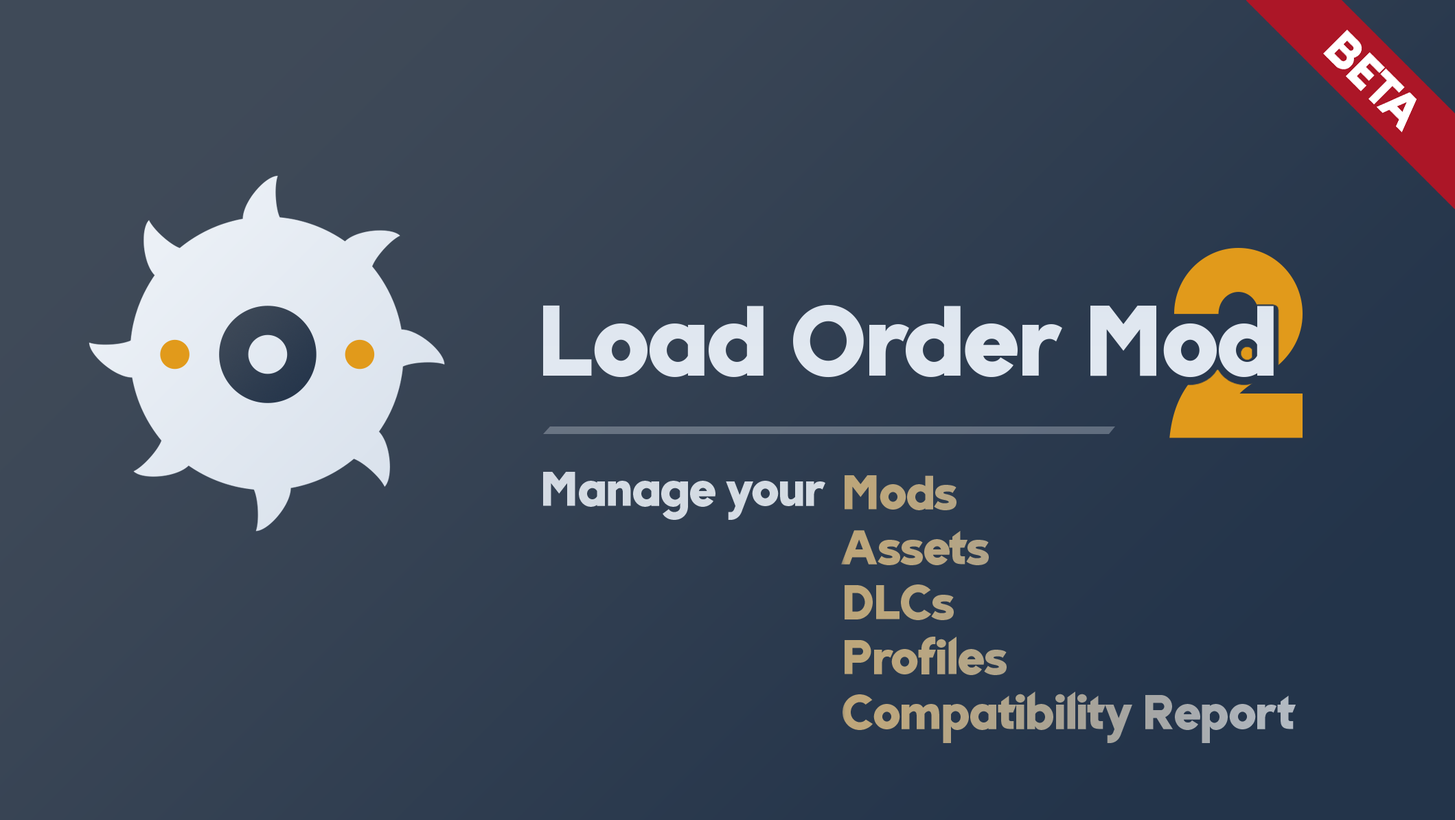
<style>
.page{position:relative;width:1455px;height:820px}
.page>*{position:absolute;margin:0}
.t1{font:307.3px "Slenco-Black";letter-spacing:-0.02em;color:#e19a1b}
.t2{font:113.5px "Slenco-Black";letter-spacing:-0.02em;color:#e0e7f0}
.t3{font:54.9px "Slenco-Black";letter-spacing:-0.02em;color:#d4dbe3}
.t4{font:54.9px/54.9px "Slenco-Black";letter-spacing:-0.02em;color:#b6a683}
</style>
<div class="page">
<p class="t1" style="left:1169px;top:248px;width:133px;height:190px">2</p>
<p class="t2" style="left:543px;top:304px;width:730px;height:74px">Load Order Mod</p>
<p class="t3" style="left:543px;top:472px;width:282px;height:48px">Manage your</p>
<p class="t4" style="left:841px;top:475px;width:454px;height:268px">Mods<br>Assets<br>DLCs<br>Profiles<br>Compatibility Report</p>
</div>
